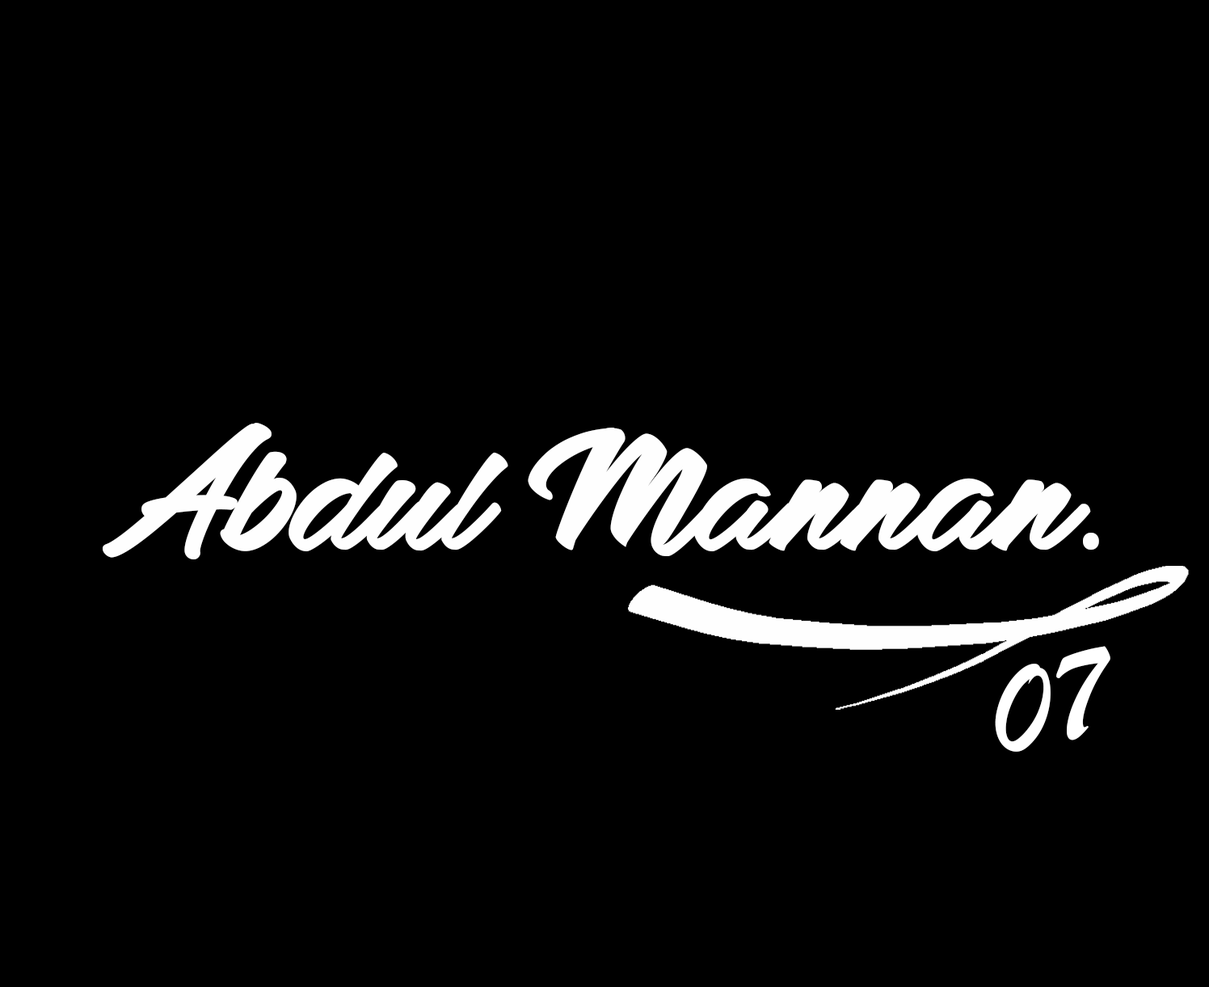
<style>
.page{position:relative;width:1209px;height:987px;background:#000000}
.page>*{position:absolute;margin:0}
.t1{font:134.7px "AdalgisaPersonalUse-Regular";color:#fefefe}
.t2{font:134.7px "MyriadPro-Regular";color:#fefefe}
.t3{font:134.7px "BrushScriptMT";color:#ffffff}
</style>
<div class="page">
<p class="t1" style="left:103px;top:423px;width:996px;height:136px">Abdul  Mannan<span class="t2">.</span></p>
<p class="t3" style="left:995px;top:646px;width:115px;height:105px;rotate:-14deg">07</p>
</div>
